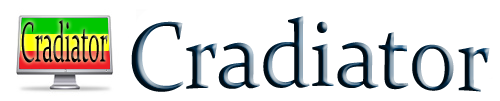
<style>
.page{position:relative;width:500px;height:101px;background:#ffffff}
.page>*{position:absolute;margin:0}
.t1{font:95.2px "Constantia";scale:0.92 1}
.t2{font:56.7px "Constantia";color:#000000;scale:0.38 1}
</style>
<div class="page">
<p class="t1" style="left:131px;top:16px;width:359px;height:76px">Cradiator</p>
<p class="t2" style="left:21px;top:19px;width:87px;height:44px">Cradiator</p>
</div>
